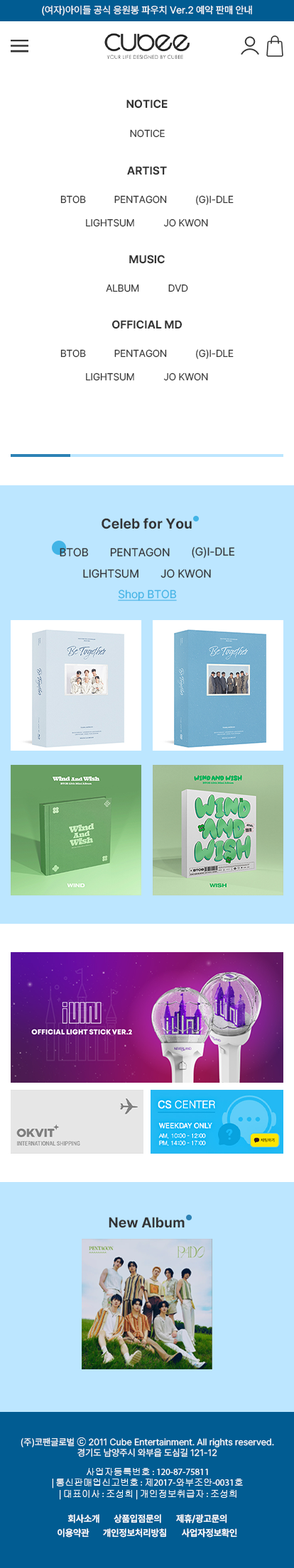
<style>
.page{position:relative;width:294px;height:1568px;background:#ffffff}
.page>*{position:absolute;margin:0}
.t1{font:9.9px "Pretendard-Regular";color:#ffffff}
.t2{font:11.4px "Pretendard-Bold";color:#333333}
.t3{font:9.9px "Pretendard-Regular";color:#333333}
.t4{font:14.2px "Pretendard-Bold";color:#333333}
.t5{font:11.4px "Pretendard-Regular";color:#333333}
.t6{font:11.4px "Pretendard-Regular";color:#42b4e6;text-decoration:underline}
.t7{font:9.2px "Pretendard-Regular";color:#ffffff}
.t8{font:9.2px "Gulim";color:#ffffff}
.t9{font:9.2px "MyriadPro-Regular";color:#ffffff}
.t10{font:9.2px "Pretendard-Bold";color:#ffffff}
</style>
<div class="page">
<p class="t1" style="left:42px;top:5px;width:210px;height:11px">(여자)아이들 공식 응원봉 파우치 Ver.2 예약 판매 안내</p>
<p class="t2" style="left:126px;top:99px;width:41px;height:10px">NOTICE</p>
<p class="t3" style="left:130px;top:129px;width:35px;height:9px">NOTICE</p>
<p class="t2" style="left:127px;top:166px;width:40px;height:9px">ARTIST</p>
<p class="t3" style="left:60px;top:195px;width:26px;height:9px">BTOB</p>
<p class="t3" style="left:114px;top:195px;width:53px;height:9px">PENTAGON</p>
<p class="t3" style="left:196px;top:195px;width:37px;height:10px">(G)I-DLE</p>
<p class="t3" style="left:86px;top:219px;width:48px;height:8px">LIGHTSUM</p>
<p class="t3" style="left:163px;top:219px;width:45px;height:8px">JO KWON</p>
<p class="t2" style="left:129px;top:255px;width:36px;height:9px">MUSIC</p>
<p class="t3" style="left:106px;top:284px;width:33px;height:8px">ALBUM</p>
<p class="t3" style="left:168px;top:284px;width:20px;height:8px">DVD</p>
<p class="t2" style="left:112px;top:320px;width:70px;height:9px">OFFICIAL MD</p>
<p class="t3" style="left:60px;top:349px;width:26px;height:9px">BTOB</p>
<p class="t3" style="left:114px;top:349px;width:53px;height:9px">PENTAGON</p>
<p class="t3" style="left:196px;top:349px;width:37px;height:10px">(G)I-DLE</p>
<p class="t3" style="left:86px;top:372px;width:48px;height:9px">LIGHTSUM</p>
<p class="t3" style="left:163px;top:372px;width:45px;height:9px">JO KWON</p>
<p class="t4" style="left:101px;top:518px;width:91px;height:11px">Celeb for You</p>
<p class="t5" style="left:60px;top:548px;width:29px;height:9px">BTOB</p>
<p class="t5" style="left:110px;top:548px;width:60px;height:9px">PENTAGON</p>
<p class="t5" style="left:192px;top:547px;width:43px;height:11px">(G)I-DLE</p>
<p class="t5" style="left:83px;top:569px;width:55px;height:9px">LIGHTSUM</p>
<p class="t5" style="left:160px;top:569px;width:51px;height:9px">JO KWON</p>
<p class="t6" style="left:118px;top:590px;width:59px;height:11px">Shop BTOB</p>
<p class="t4" style="left:109px;top:1217px;width:75px;height:11px">New Album</p>
<p class="t7" style="left:21px;top:1437px;width:253px;height:20px;text-align:center">(주)코팬글로벌 <span class="t8">ⓒ</span> 2011 Cube Entertainment. All rights reserved.<br>경기도 남양주시 와부읍 도심길 121-12</p>
<p class="t9" style="left:52px;top:1468px;width:191px;height:32px;text-align:center"><span class="t8">사업자등록번호</span> : 120-87-75811 <br>| <span class="t8">통신판매업신고번호</span> : <span class="t8">제</span>2017-<span class="t8">와부조안</span>-0031<span class="t8">호</span> <br>| <span class="t8">대표이사</span> : <span class="t8">조성희</span> | <span class="t8">개인정보취급자</span> : <span class="t8">조성희</span></p>
<p class="t10" style="left:67px;top:1514px;width:32px;height:9px">회사소개</p>
<p class="t10" style="left:114px;top:1514px;width:47px;height:9px">상품입점문의</p>
<p class="t10" style="left:176px;top:1514px;width:51px;height:9px">제휴/광고문의</p>
<p class="t10" style="left:57px;top:1528px;width:32px;height:9px">이용약관</p>
<p class="t10" style="left:103px;top:1528px;width:63px;height:9px">개인정보처리방침</p>
<p class="t10" style="left:182px;top:1528px;width:55px;height:9px">사업자정보확인</p>
</div>
